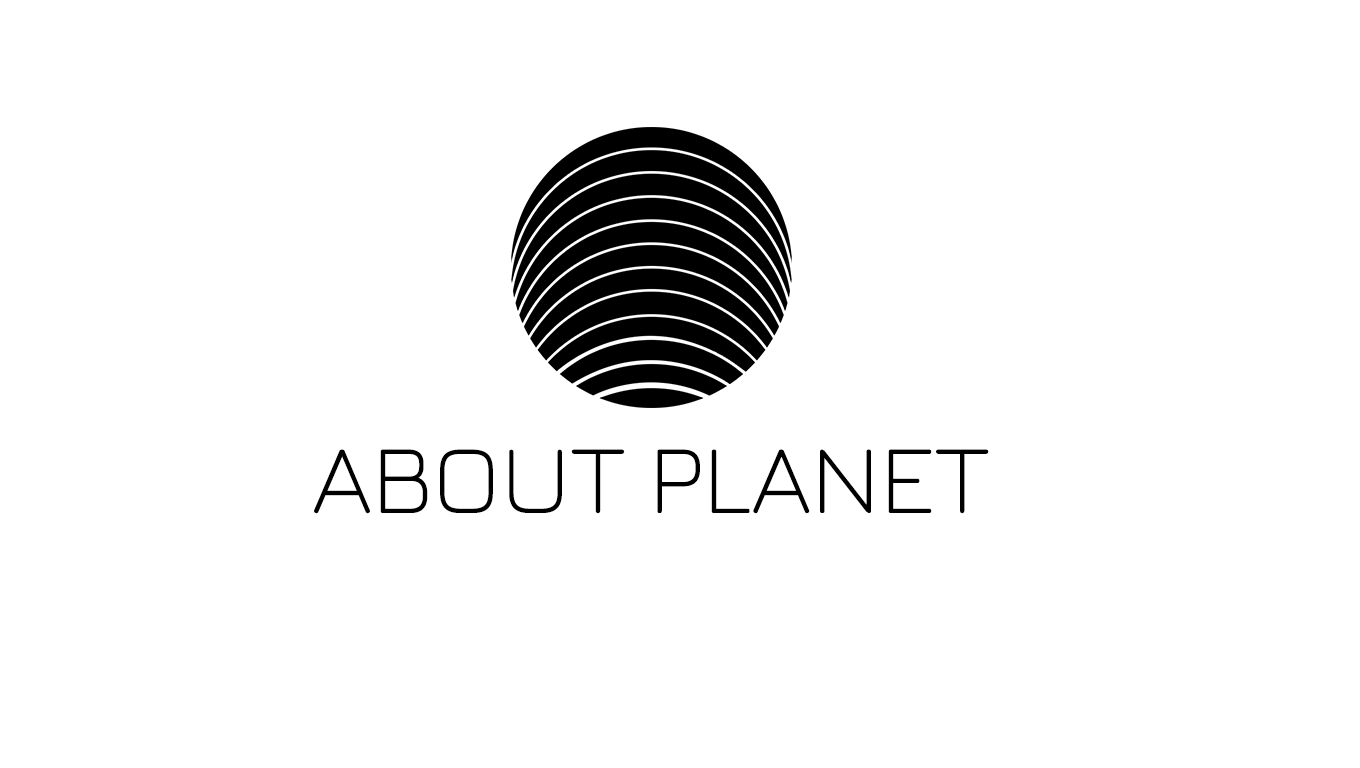
<style>
.page{position:relative;width:1360px;height:768px;background:#ffffff}
.page>*{position:absolute;margin:0}
.t1{font:100px "Jura-Light";color:#000000}
</style>
<div class="page">
<p class="t1" style="left:314px;top:449px;width:675px;height:65px">ABOUT PLANET</p>
</div>
